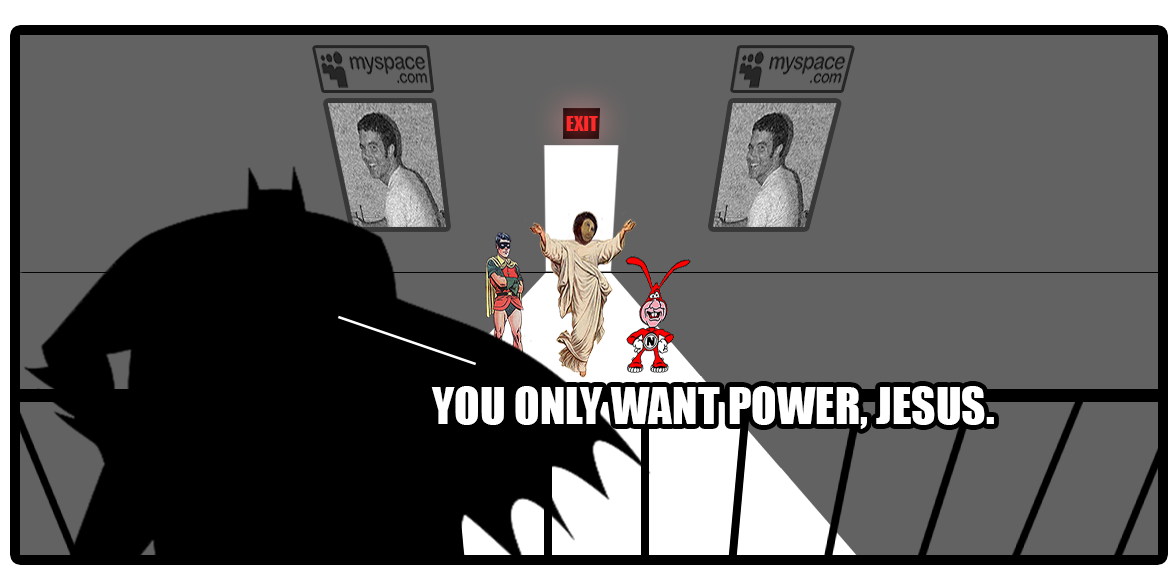
<style>
.page{position:relative;width:1175px;height:587px;background:#626262}
.page>*{position:absolute;margin:0}
.t1{font:19.4px "Impact";color:#ff2a2a}
.t2{font:47.2px "Impact";color:#ffffff}
</style>
<div class="page">
<p class="t1" style="left:566px;top:116px;width:32px;height:15px">EXIT</p>
<p class="t2" style="left:431px;top:386px;width:563px;height:43px">YOU ONLY WANT POWER, JESUS.</p>
</div>
